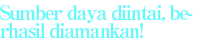
<style>
.page{position:relative;width:202px;height:42px;background:#ffffff}
.page>*{position:absolute;margin:0}
.t1{font:20px/18px "RyuminPro-ExBold";letter-spacing:-0.08em;color:#65f9fc}
</style>
<div class="page">
<p class="t1" style="left:0px;top:5px;width:193px;height:34px">Sumber daya diintai, be-<br>rhasil diamankan!</p>
</div>
